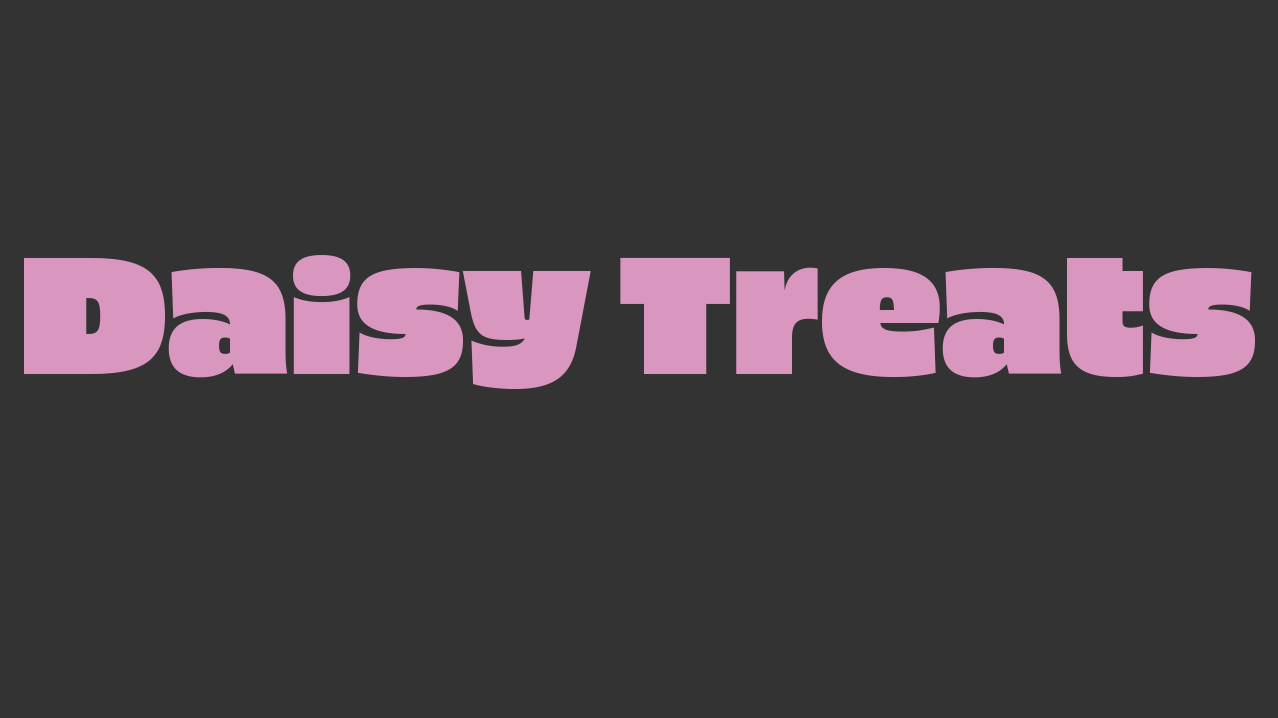
<style>
.page{position:relative;width:1278px;height:718px;background:#333333}
.page>*{position:absolute;margin:0}
.t1{font:166.2px "Piepie";color:#d996bf}
</style>
<div class="page">
<p class="t1" style="left:24px;top:255px;width:1231px;height:134px">Daisy Treats</p>
</div>
